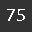
<style>
.page{position:relative;width:32px;height:32px;background:#333333}
.page>*{position:absolute;margin:0}
.t1{font:17.8px "MyriadPro-Regular";color:#ffffff;scale:1.12 1}
</style>
<div class="page">
<p class="t1" style="left:7px;top:9px;width:18px;height:12px">75</p>
</div>
